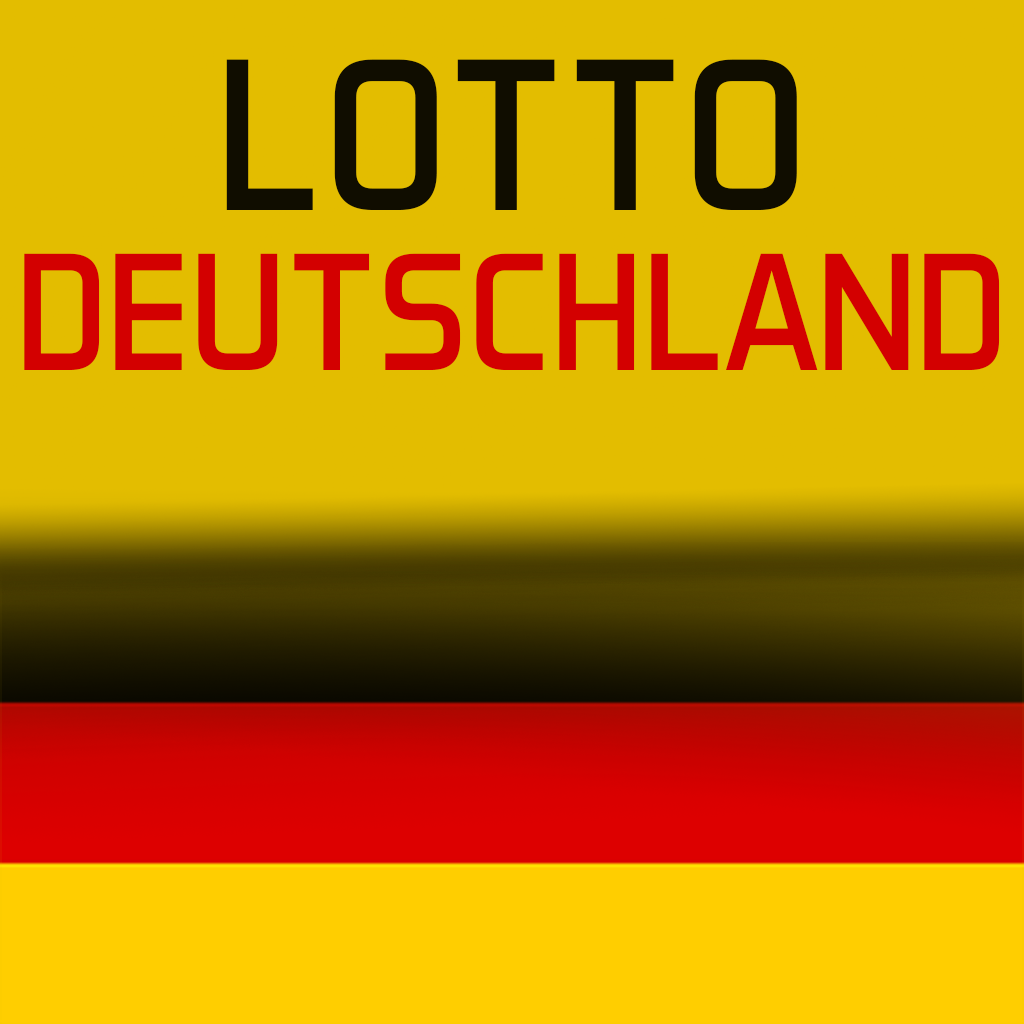
<style>
.page{position:relative;width:1024px;height:1024px;background:#e3bd00}
.page>*{position:absolute;margin:0}
.t1{font:220px "AeroMaticsDisplayRegular";color:#000000}
.t2{font:170px "AeroMaticsDisplayRegular";color:#d30000}
</style>
<div class="page">
<p class="t1" style="left:226px;top:59px;width:571px;height:151px">LOTTO</p>
<p class="t2" style="left:24px;top:253px;width:976px;height:117px">DEUTSCHLAND</p>
</div>
